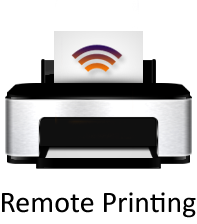
<style>
.page{position:relative;width:197px;height:224px;background:#ffffff}
.page>*{position:absolute;margin:0}
.t1{font:30px "Calibri";color:#000000}
</style>
<div class="page">
<p class="t1" style="left:2px;top:192px;width:194px;height:26px">Remote Printing</p>
</div>
